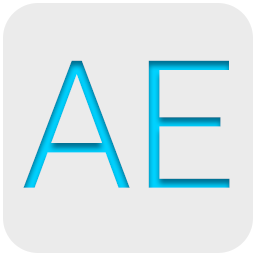
<style>
.page{position:relative;width:256px;height:256px;background:#ebebeb}
.page>*{position:absolute;margin:0}
.t1{font:178.4px "Roboto-Light"}
</style>
<div class="page">
<p class="t1" style="left:23px;top:60px;width:207px;height:128px">AE</p>
</div>
